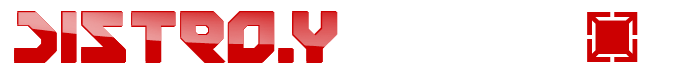
<style>
.page{position:relative;width:680px;height:83px;background:#ffffff}
.page>*{position:absolute;margin:0}
.t1{font:62.5px "ELASTICA"}
.t2{font:62.5px "ApproachingPi";color:#cc0001}
</style>
<div class="page">
<p class="t1" style="left:14px;top:11px;width:323px;height:50px">DISTRO.Y</p>
<p class="t1" style="left:14px;top:13px;width:323px;height:50px">DISTRO.Y</p>
<p class="t1" style="left:15px;top:12px;width:323px;height:50px">DISTRO.Y</p>
<p class="t2" style="left:587px;top:12px;width:51px;height:50px">D</p>
</div>
